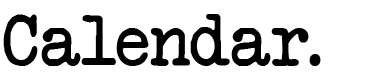
<style>
.page{position:relative;width:373px;height:77px;background:#ffffff}
.page>*{position:absolute;margin:0}
.t1{font:72px "AnotherTypewriter";color:#000000}
</style>
<div class="page">
<p class="t1" style="left:3px;top:14px;width:318px;height:52px">Calendar.</p>
</div>
